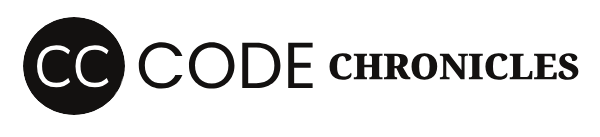
<style>
.page{position:relative;width:600px;height:137px;background:#ffffff}
.page>*{position:absolute;margin:0}
.t1{font:58px "Mulish-Regular";color:#ffffff}
.t2{font:65px "Poppins-Regular";color:#131110}
.t3{font:36px "NotoSerif-Black";color:#131110}
</style>
<div class="page">
<p class="t1" style="left:37px;top:45px;width:72px;height:43px">CC</p>
<p class="t2" style="left:138px;top:42px;width:175px;height:47px">CODE</p>
<p class="t3" style="left:329px;top:53px;width:250px;height:27px">CHRONICLES</p>
</div>
